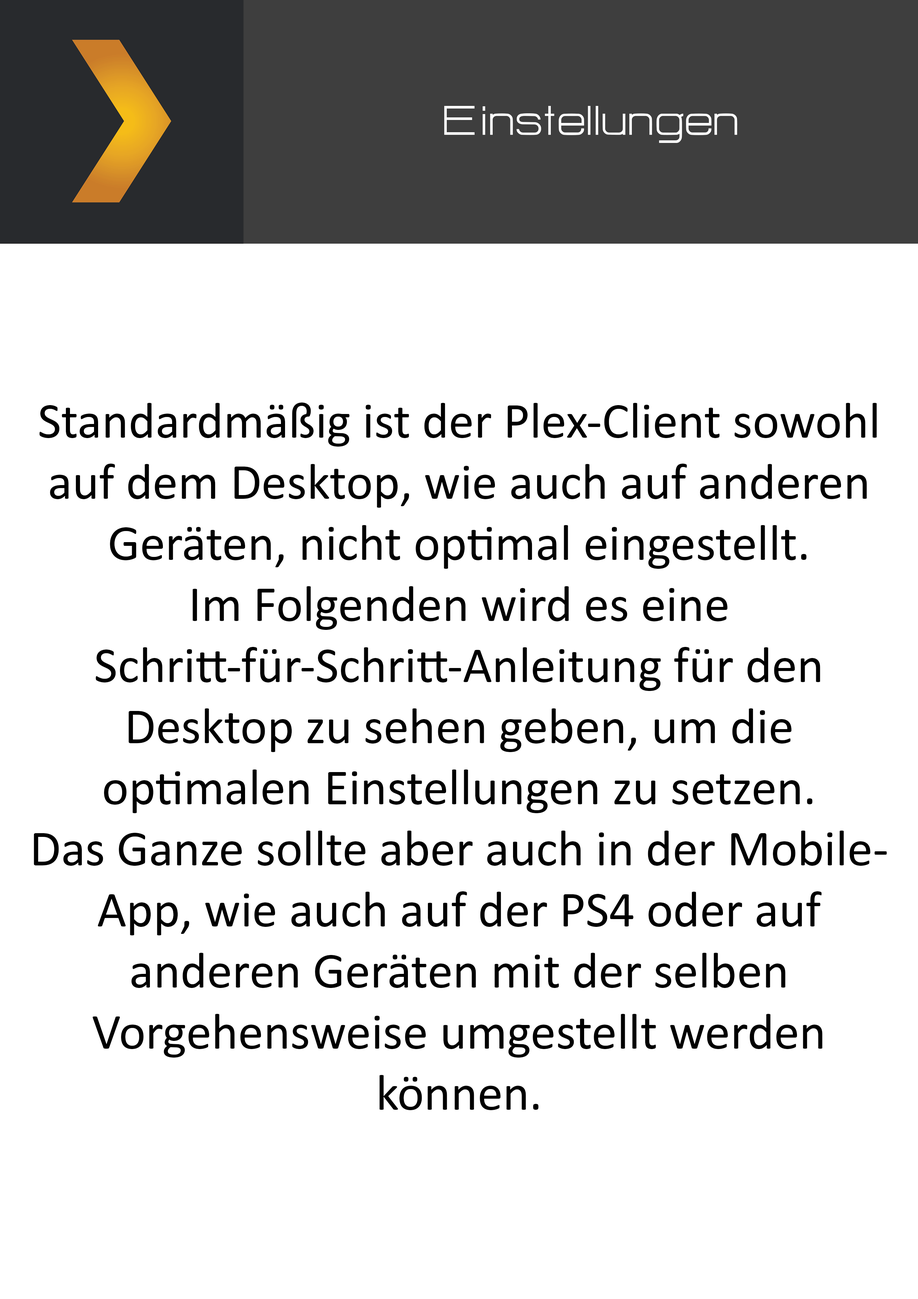
<style>
.page{position:relative;width:918px;height:1299px;background:#ffffff}
.page>*{position:absolute;margin:0}
.t1{font:50.9px "HURTMOLDPersonalUse-Regular";color:#ffffff}
.t2{font:50.9px "Calibri";color:#000000}
</style>
<div class="page">
<p class="t1" style="left:444px;top:106px;width:293px;height:37px">Einstellungen</p>
<p class="t2" style="left:34px;top:402px;width:853px;height:708px;text-align:center">Standardmäßig ist der Plex-Client sowohl<br>auf dem Desktop, wie auch auf anderen<br>Geräten, nicht optimal eingestellt.<br>Im Folgenden wird es eine<br>Schritt-für-Schritt-Anleitung für den<br>Desktop zu sehen geben, um die<br>optimalen Einstellungen zu setzen.<br>Das Ganze sollte aber auch in der Mobile-<br>App, wie auch auf der PS4 oder auf<br>anderen Geräten mit der selben<br>Vorgehensweise umgestellt werden<br>können.</p>
</div>
